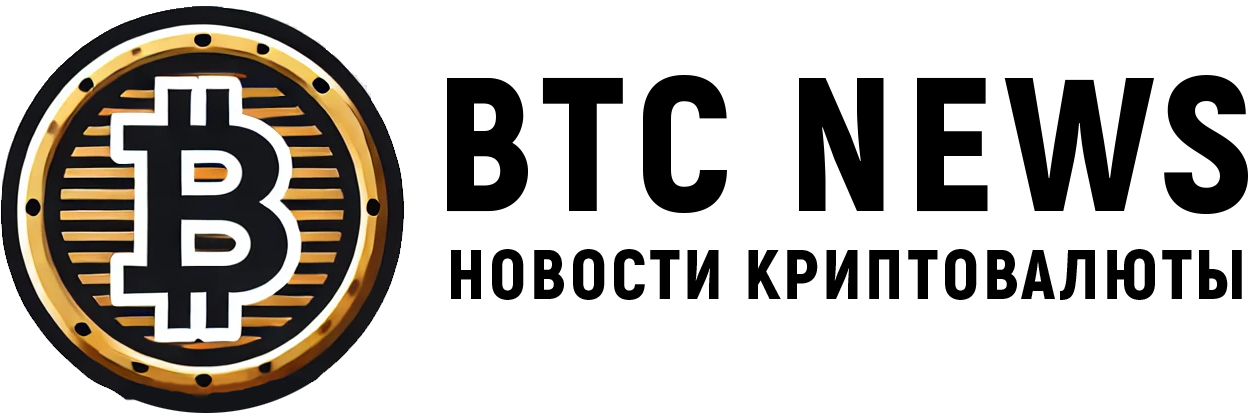
<style>
.page{position:relative;width:1250px;height:418px;background:#ffffff}
.page>*{position:absolute;margin:0}
.t1{font:190px "Akrobat-Black";letter-spacing:0.05em;color:#000000}
.t2{font:69.5px "Akrobat-Black";letter-spacing:0.05em;color:#000000}
</style>
<div class="page">
<p class="t1" style="left:447px;top:75px;width:801px;height:139px">BTC NEWS</p>
<p class="t2" style="left:451px;top:249px;width:791px;height:51px">НОВОСТИ КРИПТОВАЛЮТЫ</p>
</div>
